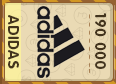
<style>
.page{position:relative;width:116px;height:84px;background:#eadab4}
.page>*{position:absolute;margin:0}
.t1{font:15px "RotondaC-Bold";letter-spacing:0.04em;color:#43341d;text-transform:uppercase}
</style>
<div class="page">
<p class="t1" style="left:8px;top:15px;width:11px;height:54px;rotate:90deg">adidas</p>
<p class="t1" style="left:95px;top:13px;width:11px;height:56px;rotate:90deg">190 000</p>
</div>
